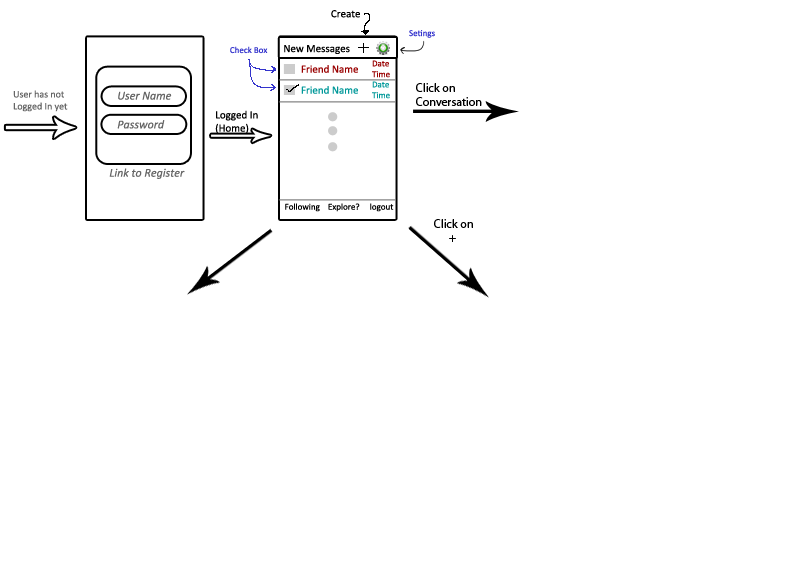
<style>
.page{position:relative;width:792px;height:576px;background:#ffffff}
.page>*{position:absolute;margin:0}
.t1{font:11px "Calibri";color:#000000}
.t2{font:12px "MyriadPro-Regular";color:#000000}
.t3{font:10px "Calibri";color:#666666}
.t4{font:12px "Calibri-Italic";color:#666666}
.t5{font:9px "Calibri";color:#000000}
</style>
<div class="page">
<p class="t1" style="left:284px;top:45px;width:66px;height:9px">New Messages</p>
<p class="t2" style="left:416px;top:83px;width:66px;height:23px">Click on <br>Conversation</p>
<p class="t3" style="left:13px;top:90px;width:55px;height:22px">User has not <br>Logged In yet</p>
<p class="t4" style="left:117px;top:91px;width:55px;height:38px">User Name<br><br>Password</p>
<p class="t1" style="left:215px;top:110px;width:43px;height:24px">Logged In<br>(Home)</p>
<p class="t4" style="left:109px;top:168px;width:76px;height:11px">Link to Register</p>
<p class="t5" style="left:285px;top:203px;width:109px;height:9px">Following    Explore?     logout</p>
<p class="t2" style="left:434px;top:219px;width:39px;height:23px">Click on <br>      +</p>
</div>
